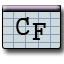
<style>
.page{position:relative;width:64px;height:64px;background:#cddadd}
.page>*{position:absolute;margin:0}
.t1{font:24px "Gungsuh";color:#000000}
</style>
<div class="page">
<p class="t1" style="left:16px;top:17px;width:14px;height:18px">C</p>
<p class="t1" style="left:32px;top:23px;width:14px;height:17px">F</p>
</div>
